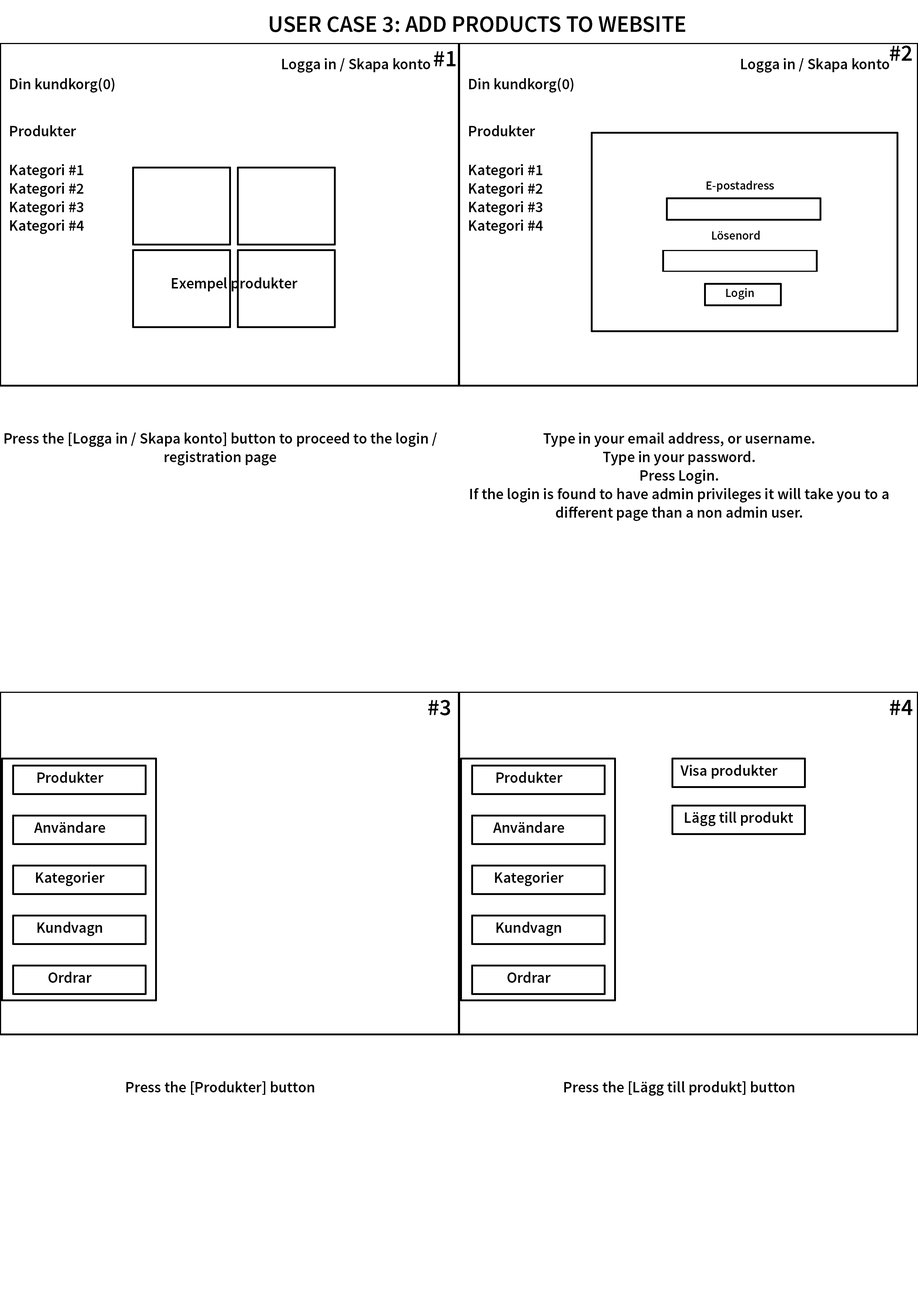
<style>
.page{position:relative;width:918px;height:1299px;background:#ffffff}
.page>*{position:absolute;margin:0}
.t1{font:23.1px "SourceSansPro-Semibold";color:#000000}
.t2{font:15.4px "SourceSansPro-Semibold";color:#000000}
.t3{font:12.3px "SourceSansPro-Semibold";color:#000000}
</style>
<div class="page">
<p class="t1" style="left:270px;top:16px;width:416px;height:16px">USER CASE 3: ADD PRODUCTS TO WEBSITE</p>
<p class="t1" style="left:434px;top:51px;width:22px;height:15px">#1</p>
<p class="t1" style="left:890px;top:46px;width:22px;height:15px">#2</p>
<p class="t2" style="left:282px;top:58px;width:148px;height:15px">Logga in / Skapa konto</p>
<p class="t2" style="left:741px;top:58px;width:148px;height:15px">Logga in / Skapa konto</p>
<p class="t2" style="left:10px;top:78px;width:104px;height:15px">Din kundkorg(0)</p>
<p class="t2" style="left:469px;top:78px;width:104px;height:15px">Din kundkorg(0)</p>
<p class="t2" style="left:10px;top:125px;width:66px;height:11px">Produkter</p>
<p class="t2" style="left:469px;top:125px;width:66px;height:11px">Produkter</p>
<p class="t2" style="left:10px;top:164px;width:74px;height:70px;text-align:center">Kategori #1<br>Kategori #2<br>Kategori #3<br>Kategori #4</p>
<p class="t2" style="left:469px;top:164px;width:74px;height:70px;text-align:center">Kategori #1<br>Kategori #2<br>Kategori #3<br>Kategori #4</p>
<p class="t3" style="left:707px;top:181px;width:67px;height:11px">E-postadress</p>
<p class="t3" style="left:712px;top:231px;width:48px;height:9px">Lösenord</p>
<p class="t2" style="left:172px;top:277px;width:126px;height:14px">Exempel produkter</p>
<p class="t3" style="left:726px;top:288px;width:28px;height:12px">Login</p>
<p class="t2" style="left:4px;top:432px;width:433px;height:33px;text-align:center">Press the [Logga in / Skapa konto] button to proceed to the login / registration page</p>
<p class="t2" style="left:470px;top:432px;width:419px;height:89px;text-align:center">Type in your email address, or username.<br>Type in your password.<br>Press Login.<br>If the login is found to have admin privileges it will take you to a different page than a non admin user.</p>
<p class="t1" style="left:428px;top:700px;width:22px;height:15px">#3</p>
<p class="t2" style="left:37px;top:772px;width:67px;height:11px">Produkter</p>
<p class="t2" style="left:496px;top:772px;width:67px;height:11px">Produkter</p>
<p class="t2" style="left:680px;top:765px;width:98px;height:14px">Visa produkter</p>
<p class="t2" style="left:34px;top:822px;width:71px;height:11px">Användare</p>
<p class="t2" style="left:493px;top:822px;width:71px;height:11px">Användare</p>
<p class="t2" style="left:685px;top:812px;width:108px;height:14px">Lägg till produkt</p>
<p class="t2" style="left:36px;top:872px;width:69px;height:14px">Kategorier</p>
<p class="t2" style="left:495px;top:872px;width:69px;height:14px">Kategorier</p>
<p class="t2" style="left:37px;top:921px;width:65px;height:15px">Kundvagn</p>
<p class="t2" style="left:496px;top:921px;width:65px;height:15px">Kundvagn</p>
<p class="t2" style="left:48px;top:971px;width:44px;height:12px">Ordrar</p>
<p class="t2" style="left:508px;top:971px;width:43px;height:12px">Ordrar</p>
<p class="t2" style="left:126px;top:1081px;width:188px;height:14px">Press the [Produkter] button</p>
<p class="t2" style="left:564px;top:1081px;width:230px;height:14px">Press the [Lägg till produkt] button</p>
</div>
